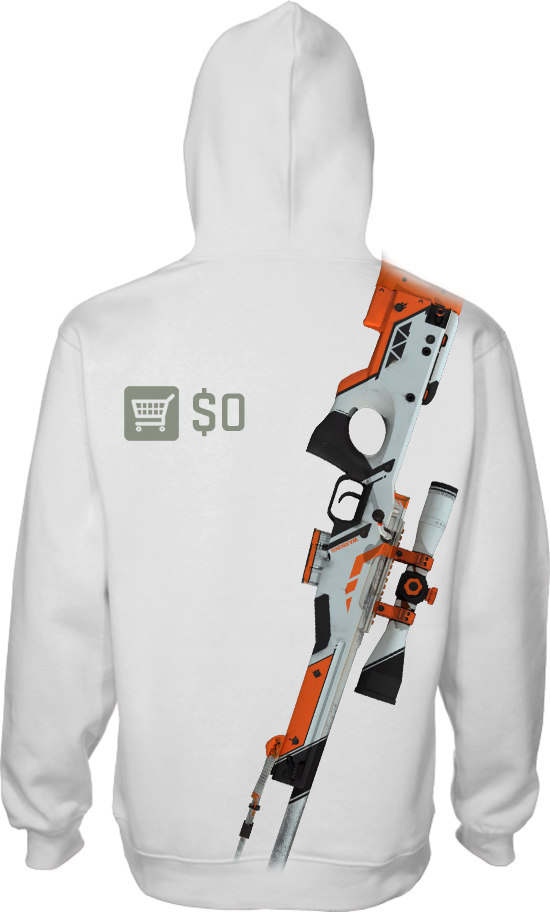
<style>
.page{position:relative;width:550px;height:912px;background:#ffffff}
.page>*{position:absolute;margin:0}
.t1{font:56px "Stratum2-Medium";letter-spacing:-0.05em;color:#899082;font-weight:bold}
</style>
<div class="page">
<p class="t1" style="left:192px;top:388px;width:53px;height:49px">$0</p>
</div>
